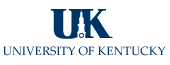
<style>
.page{position:relative;width:170px;height:65px;background:#ffffff}
.page>*{position:absolute;margin:0}
.t1{font:12px "PalatinoLinotype-Roman";color:#003366}
</style>
<div class="page">
<p class="t1" style="left:2px;top:46px;width:164px;height:10px">UNIVERSITY OF KENTUCKY</p>
</div>
